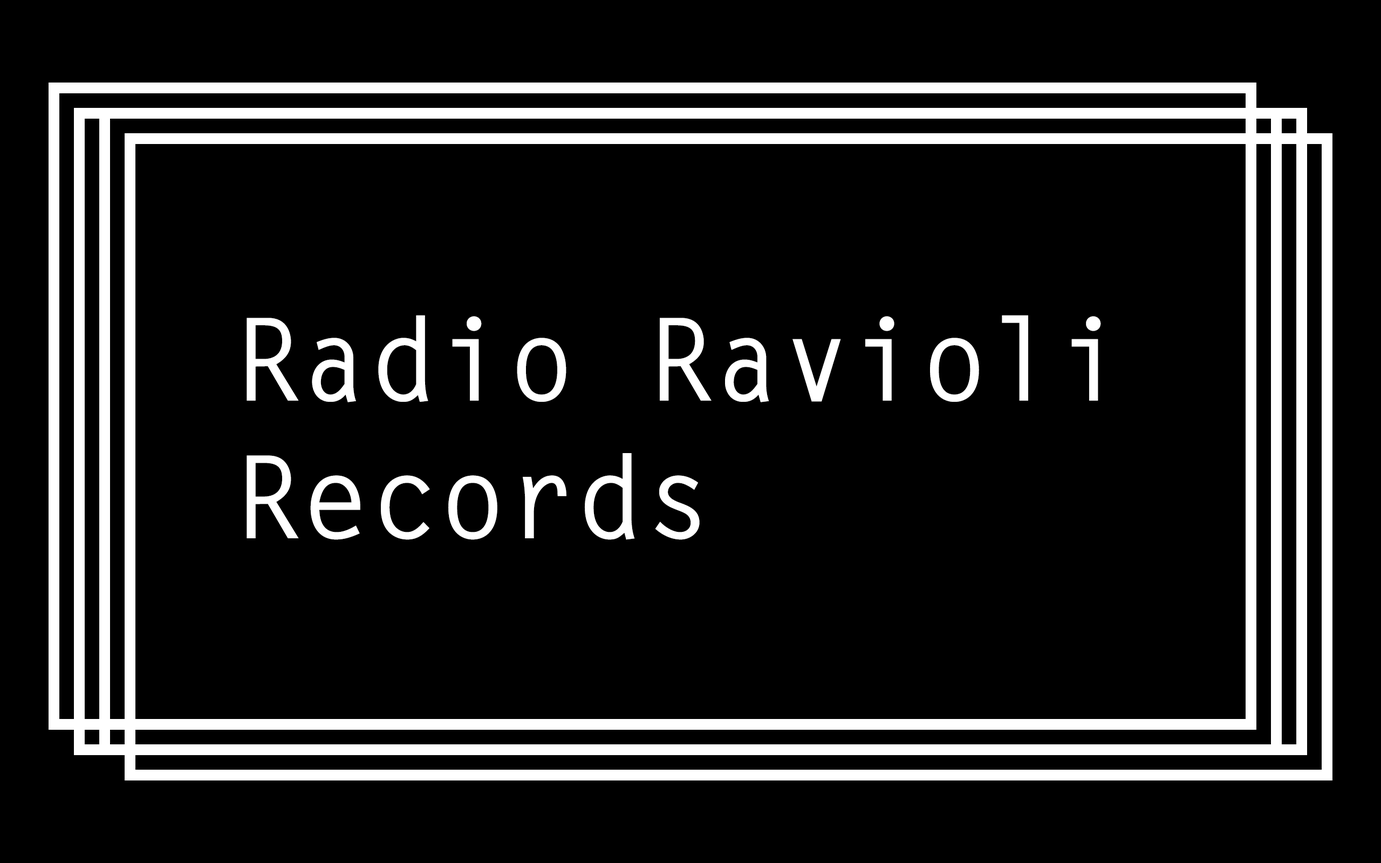
<style>
.page{position:relative;width:1381px;height:863px;background:#000000}
.page>*{position:absolute;margin:0}
.t1{font:114.7px "LetterGothicStd-Bold";color:#ffffff}
</style>
<div class="page">
<p class="t1" style="left:247px;top:315px;width:854px;height:225px">Radio Ravioli<br>Records</p>
</div>
